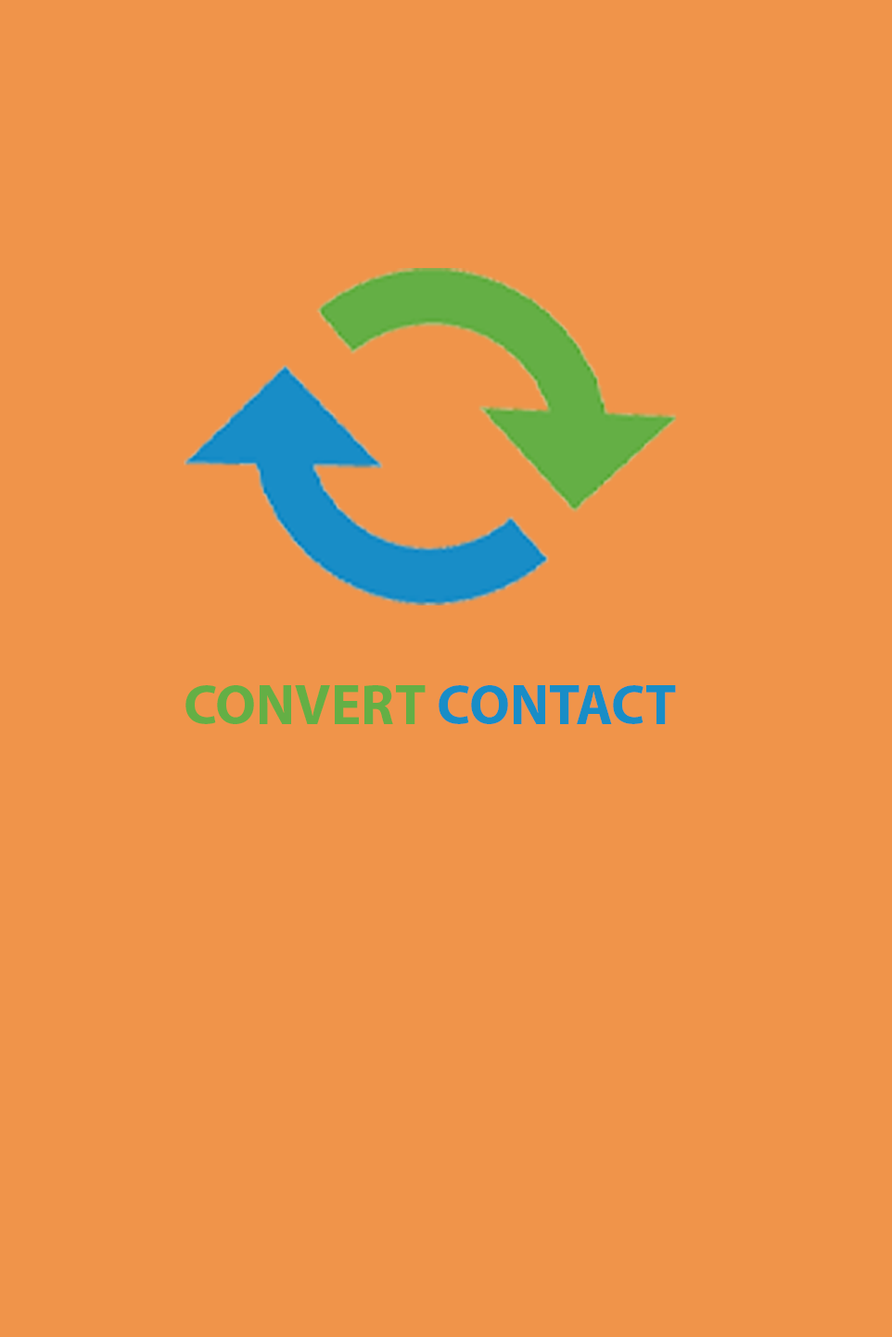
<style>
.page{position:relative;width:892px;height:1337px;background:#f0944a}
.page>*{position:absolute;margin:0}
.t1{font:56.5px "MyriadPro-Bold";color:#64af45}
.t2{font:56.5px "MyriadPro-Bold";color:#188dc7}
</style>
<div class="page">
<p class="t1" style="left:185px;top:685px;width:491px;height:39px">CONVERT <span class="t2">CONTACT</span></p>
</div>
